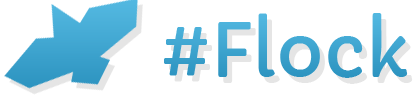
<style>
.page{position:relative;width:413px;height:95px;background:#ffffff}
.page>*{position:absolute;margin:0}
.t1{font:72px "Capriola-Regular";color:#349cc7}
</style>
<div class="page">
<p class="t1" style="left:164px;top:13px;width:244px;height:65px">#Flock</p>
</div>
